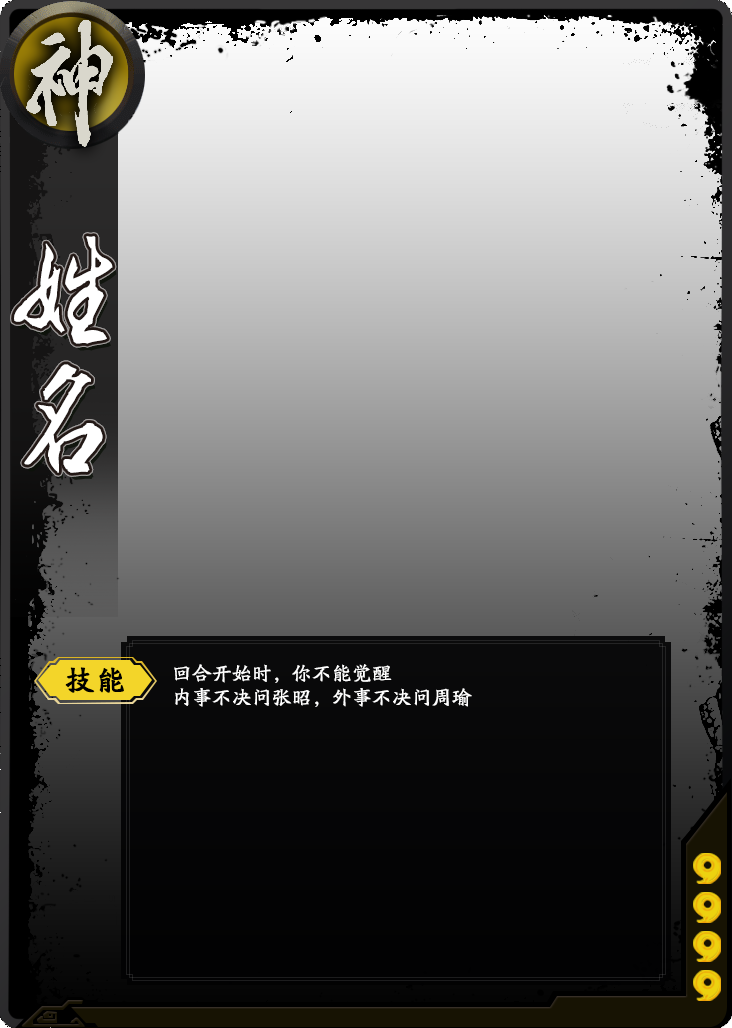
<style>
.page{position:relative;width:732px;height:1028px}
.page>*{position:absolute;margin:0}
.t1{font:108.8px "ª÷±ö¯ó¦æ®Ñ";letter-spacing:0.18em;color:#ffffff}
.t2{font:20px/24px "FZBWKSJW--GB1-0";color:#ffffff}
.t3{font:29.2px "FZBWKSJW--GB1-0";letter-spacing:0.04em;color:#000000;font-weight:bold}
</style>
<div class="page">
<p class="t1" style="left:14px;top:236px;width:99px;height:237px;text-align:center">姓名</p>
<p class="t2" style="left:174px;top:664px;width:298px;height:43px">回合开始时，你不能觉醒<br>内事不决问张昭，外事不决问周瑜</p>
<p class="t3" style="left:65px;top:667px;width:59px;height:26px">技能</p>
</div>
